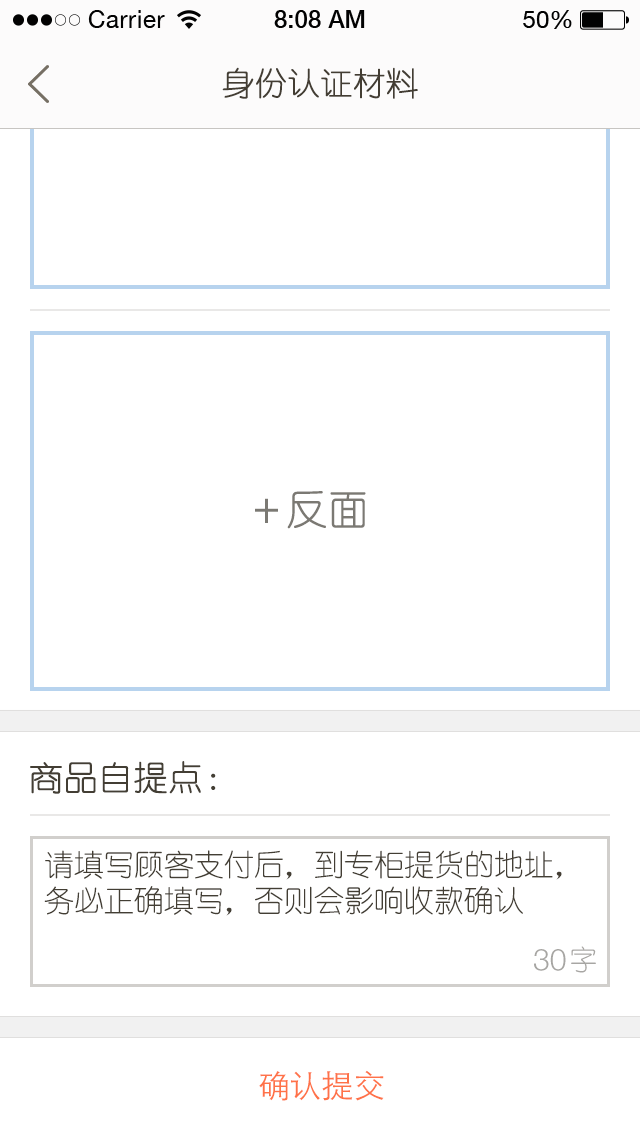
<style>
.page{position:relative;width:640px;height:1136px;background:#ffffff}
.page>*{position:absolute;margin:0}
.t1{font:32px "YouYuan";color:#433d33;text-transform:uppercase;font-weight:bold}
.t2{font:40px "YouYuan";color:#7b7973;text-transform:uppercase;font-weight:bold}
.t3{font:34px "YouYuan";color:#433e34;text-transform:uppercase;font-weight:bold}
.t4{font:30px "YouYuan";color:#433e34;text-transform:uppercase}
.t5{font:30px "HelveticaNeueLTPro-Lt";color:#a7a6a3;text-transform:uppercase}
.t6{font:28px "YouYuan";color:#a7a6a3;text-transform:uppercase}
.t7{font:32px "STHeitiSC-Light";color:#ff7248;text-transform:uppercase}
</style>
<div class="page">
<p class="t1" style="left:222px;top:67px;width:196px;height:32px">身份认证材料</p>
<p class="t2" style="left:255px;top:491px;width:111px;height:38px">＋反面</p>
<p class="t3" style="left:30px;top:761px;width:186px;height:33px">商品自提点：</p>
<p class="t4" style="left:44px;top:850px;width:518px;height:66px">请填写顾客支付后，到专柜提货的地址，务必正确填写，否则会影响收款确认</p>
<p class="t5" style="left:534px;top:949px;width:32px;height:22px">30</p>
<p class="t6" style="left:571px;top:946px;width:25px;height:27px">字</p>
<p class="t7" style="left:259px;top:1070px;width:125px;height:31px">确认提交</p>
</div>
